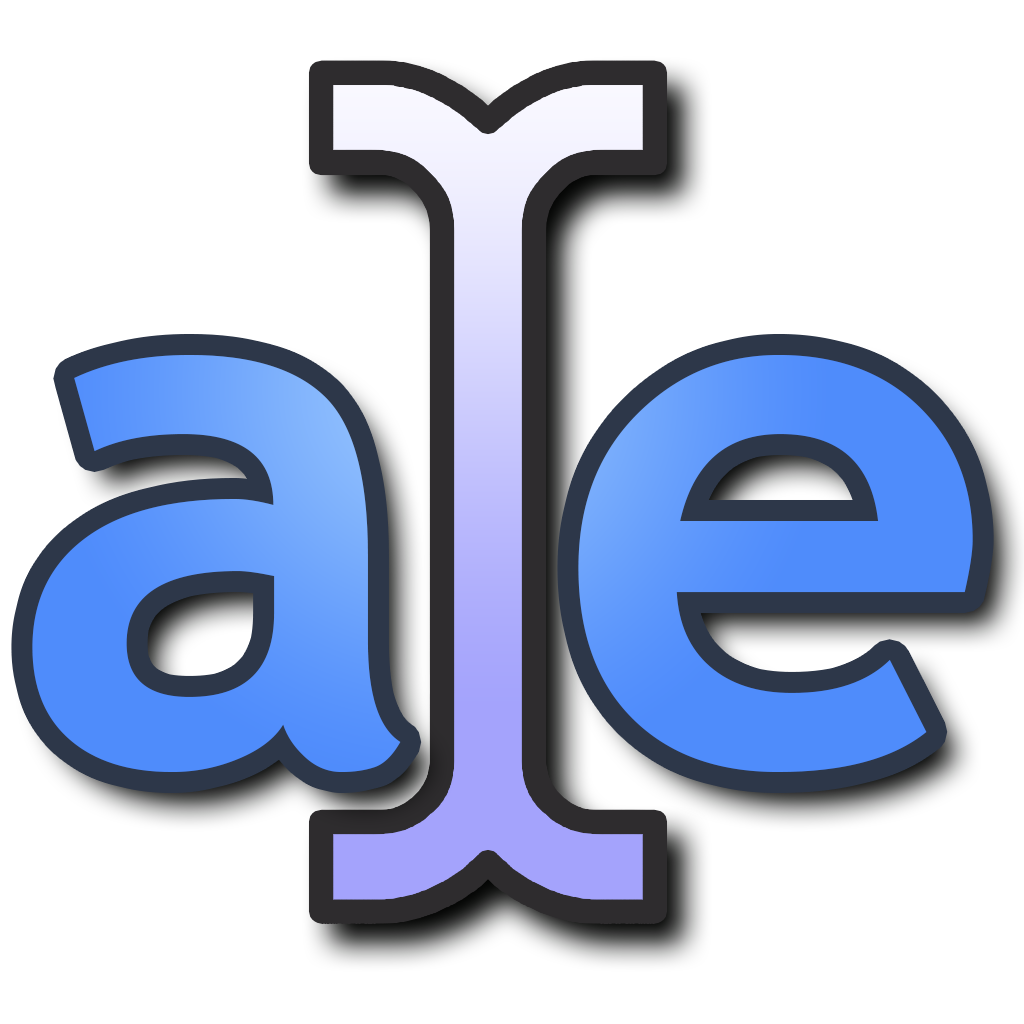
<style>
.page{position:relative;width:1024px;height:1024px;background:#ffffff}
.page>*{position:absolute;margin:0}
.t1{font:770.8px "TrebuchetMS-Bold";letter-spacing:0.175em;color:#5590fc}
</style>
<div class="page">
<p class="t1" style="left:32px;top:355px;width:941px;height:417px">ae</p>
</div>
